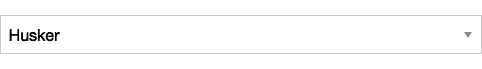
<style>
.page{position:relative;width:482px;height:69px;background:#ffffff}
.page>*{position:absolute;margin:0}
.t1{font:12px "MyriadPro-Regular";color:#0a0a0a}
</style>
<div class="page">
<p class="t1" style="left:9px;top:29px;width:51px;height:13px">Husker</p>
</div>
